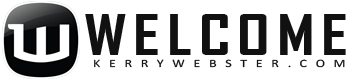
<style>
.page{position:relative;width:358px;height:80px;background:#ffffff}
.page>*{position:absolute;margin:0}
.t1{font:54.4px "AgencyFB-Bold";letter-spacing:0.1em;color:#111111;scale:1.25 1}
.t2{font:11.2px "Calibri";letter-spacing:0.62em;color:#111111;scale:1.25 1}
</style>
<div class="page">
<p class="t1" style="left:85px;top:14px;width:261px;height:41px">WELCOME</p>
<p class="t2" style="left:94px;top:59px;width:251px;height:9px">KERRYWEBSTER.COM</p>
</div>
